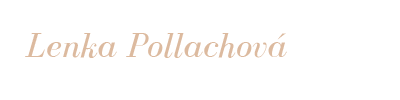
<style>
.page{position:relative;width:400px;height:100px;background:#ffffff}
.page>*{position:absolute;margin:0}
.t1{font:36px "BodoniFLF-Italic";color:#dcba9f}
</style>
<div class="page">
<p class="t1" style="left:25px;top:33px;width:262px;height:25px">Lenka Pollachová</p>
</div>
